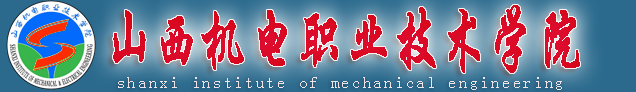
<style>
.page{position:relative;width:636px;height:92px}
.page>*{position:absolute;margin:0}
.t1{font:73.3px "FZXKJW--GB1-0";letter-spacing:0.05em;color:#da0a25;font-weight:bold;scale:0.61 1}
.t2{font:17px "NSimSun";letter-spacing:0.1em;color:#efe3e7}
</style>
<div class="page">
<p class="t1" style="left:113px;top:5px;width:467px;height:68px">山西机电职业技术学院</p>
<p class="t2" style="left:118px;top:77px;width:444px;height:13px">shanxi institute of mechanical engineering</p>
</div>
